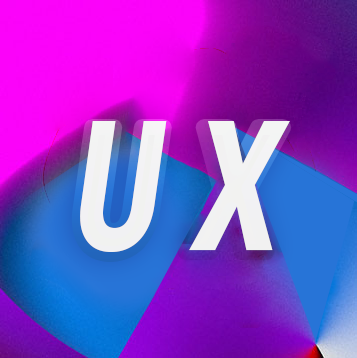
<style>
.page{position:relative;width:357px;height:358px}
.page>*{position:absolute;margin:0}
.t1{font:310.6px "Roboto-Black";letter-spacing:0.62em;color:#ffffff;font-variant:small-caps;font-style:italic;scale:0.72 1}
.t2{font:301.9px "Roboto-Black";letter-spacing:0.62em;color:#ffffff;font-variant:small-caps;font-style:italic;scale:0.72 1}
</style>
<div class="page">
<p class="t1" style="left:80px;top:121px;width:210px;height:131px;opacity:0.42">UX</p>
<p class="t1" style="left:80px;top:121px;width:210px;height:131px;opacity:0.88">UX</p>
<p class="t2" style="left:79px;top:127px;width:205px;height:127px">UX</p>
</div>
